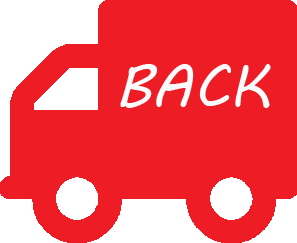
<style>
.page{position:relative;width:297px;height:243px;background:#ee1c24}
.page>*{position:absolute;margin:0}
.t1{font:60px "MVBoli";color:#fbfbfb}
</style>
<div class="page">
<p class="t1" style="left:120px;top:64px;width:151px;height:44px">BACK</p>
</div>
